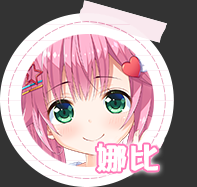
<style>
.page{position:relative;width:197px;height:187px;background:#333333}
.page>*{position:absolute;margin:0}
.t1{font:19.3px "shetumodengxiaofangti";color:#ffffff;font-weight:bold}
</style>
<div class="page">
<p class="t1" style="left:96px;top:143px;width:62px;height:29px">娜比</p>
</div>
